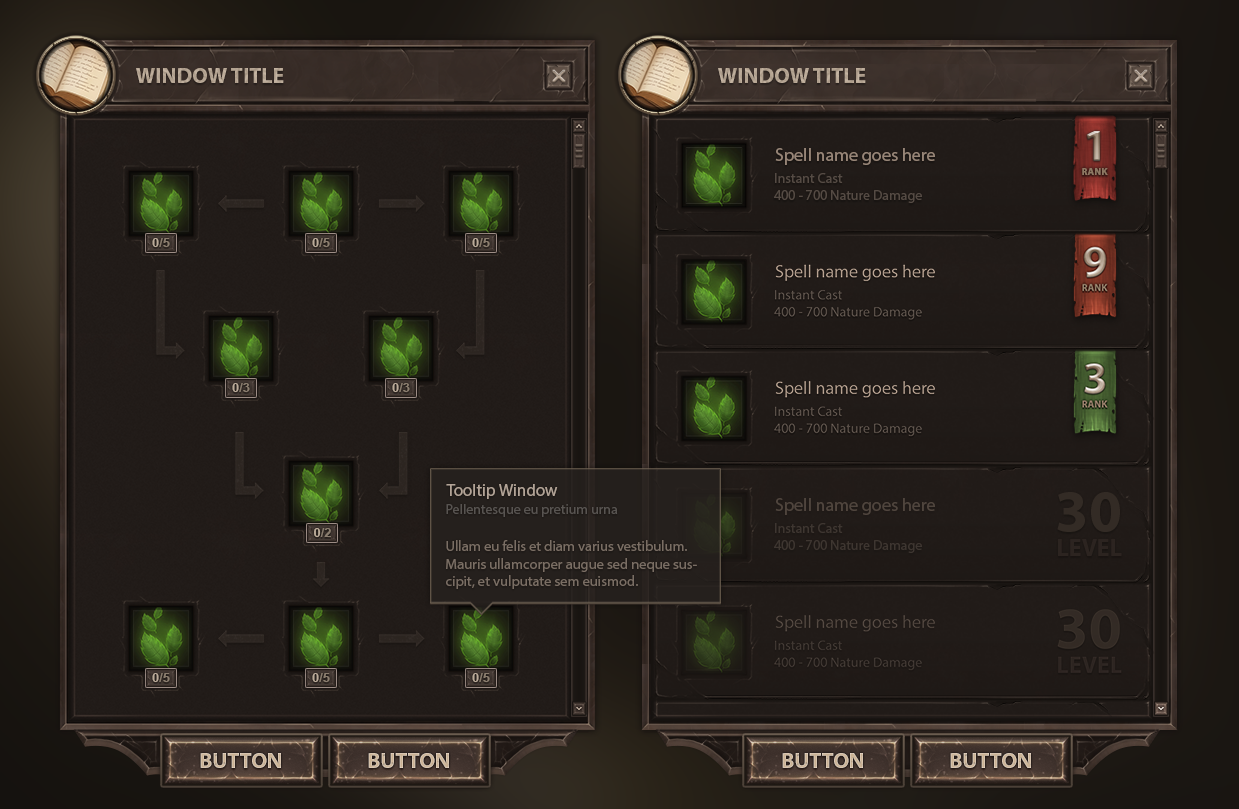
<style>
.page{position:relative;width:1239px;height:809px}
.page>*{position:absolute;margin:0}
.t1{font:22px "MyriadPro-Bold";color:#c1ae99;text-transform:uppercase}
.t2{font:45px "MyriadPro-Bold"}
.t3{font:18px "MyriadPro-Regular";color:#978577}
.t4{font:14px "MyriadPro-Regular";color:#554b44}
.t5{font:10px "MyriadPro-Bold";color:#8e7863}
.t6{font:11.7px "Arial-BoldMT";color:#8a7d6e;text-transform:uppercase;scale:1.11 1}
.t7{font:11.7px "Arial-BoldMT";color:#bbab99;text-transform:uppercase;scale:1.11 1}
.t8{font:17px "MyriadPro-Regular";color:#b3a497}
.t9{font:60px "MyriadPro-Bold";color:#3a312a;text-transform:uppercase}
.t10{font:14px "MyriadPro-Regular";color:#585451}
.t11{font:18px "MyriadPro-Regular";color:#4f453d}
.t12{font:14.5px "MyriadPro-Regular";color:#7a6e64}
.t13{font:24px "MyriadPro-Bold";color:#312824;text-transform:uppercase}
.t14{font:22px "MyriadPro-Bold";color:#cab294;text-transform:uppercase}
</style>
<div class="page">
<p class="t1" style="left:136px;top:68px;width:148px;height:15px">Window Title</p>
<p class="t1" style="left:718px;top:68px;width:148px;height:15px">Window Title</p>
<p class="t2" style="left:1086px;top:131px;width:14px;height:30px">1</p>
<p class="t3" style="left:775px;top:148px;width:160px;height:17px">Spell name goes here</p>
<p class="t4" style="left:774px;top:173px;width:148px;height:30px">Instant Cast<br>400 - 700 Nature Damage</p>
<p class="t5" style="left:1082px;top:168px;width:26px;height:7px">RANK</p>
<p class="t6" style="left:152px;top:238px;width:18px;height:9px"><span class="t7">0</span>/5</p>
<p class="t6" style="left:312px;top:238px;width:18px;height:9px"><span class="t7">0</span>/5</p>
<p class="t6" style="left:472px;top:238px;width:18px;height:9px"><span class="t7">0</span>/5</p>
<p class="t6" style="left:232px;top:383px;width:18px;height:9px"><span class="t7">0</span>/3</p>
<p class="t6" style="left:392px;top:383px;width:18px;height:9px"><span class="t7">0</span>/3</p>
<p class="t8" style="left:446px;top:484px;width:112px;height:15px">Tooltip Window</p>
<p class="t9" style="left:1057px;top:492px;width:63px;height:40px;opacity:0.7">30</p>
<p class="t10" style="left:446px;top:504px;width:172px;height:13px">Pellentesque eu pretium urna</p>
<p class="t11" style="left:775px;top:498px;width:160px;height:17px">Spell name goes here</p>
<p class="t6" style="left:314px;top:528px;width:17px;height:9px"><span class="t7">0</span>/2</p>
<p class="t4" style="left:774px;top:523px;width:148px;height:30px;opacity:0.5">Instant Cast<br>400 - 700 Nature Damage</p>
<p class="t12" style="left:446px;top:540px;width:251px;height:49px">Ullam eu felis et diam varius vestibulum. Mauris ullamcorper augue sed neque suscipit, et vulputate sem euismod.</p>
<p class="t13" style="left:1058px;top:539px;width:64px;height:17px;opacity:0.7">level</p>
<p class="t6" style="left:152px;top:673px;width:18px;height:9px"><span class="t7">0</span>/5</p>
<p class="t6" style="left:312px;top:673px;width:18px;height:9px"><span class="t7">0</span>/5</p>
<p class="t6" style="left:472px;top:673px;width:18px;height:9px"><span class="t7">0</span>/5</p>
<p class="t14" style="left:200px;top:753px;width:81px;height:15px">button</p>
<p class="t14" style="left:368px;top:753px;width:81px;height:15px">button</p>
<p class="t14" style="left:782px;top:753px;width:81px;height:15px">button</p>
<p class="t14" style="left:950px;top:753px;width:81px;height:15px">button</p>
</div>
